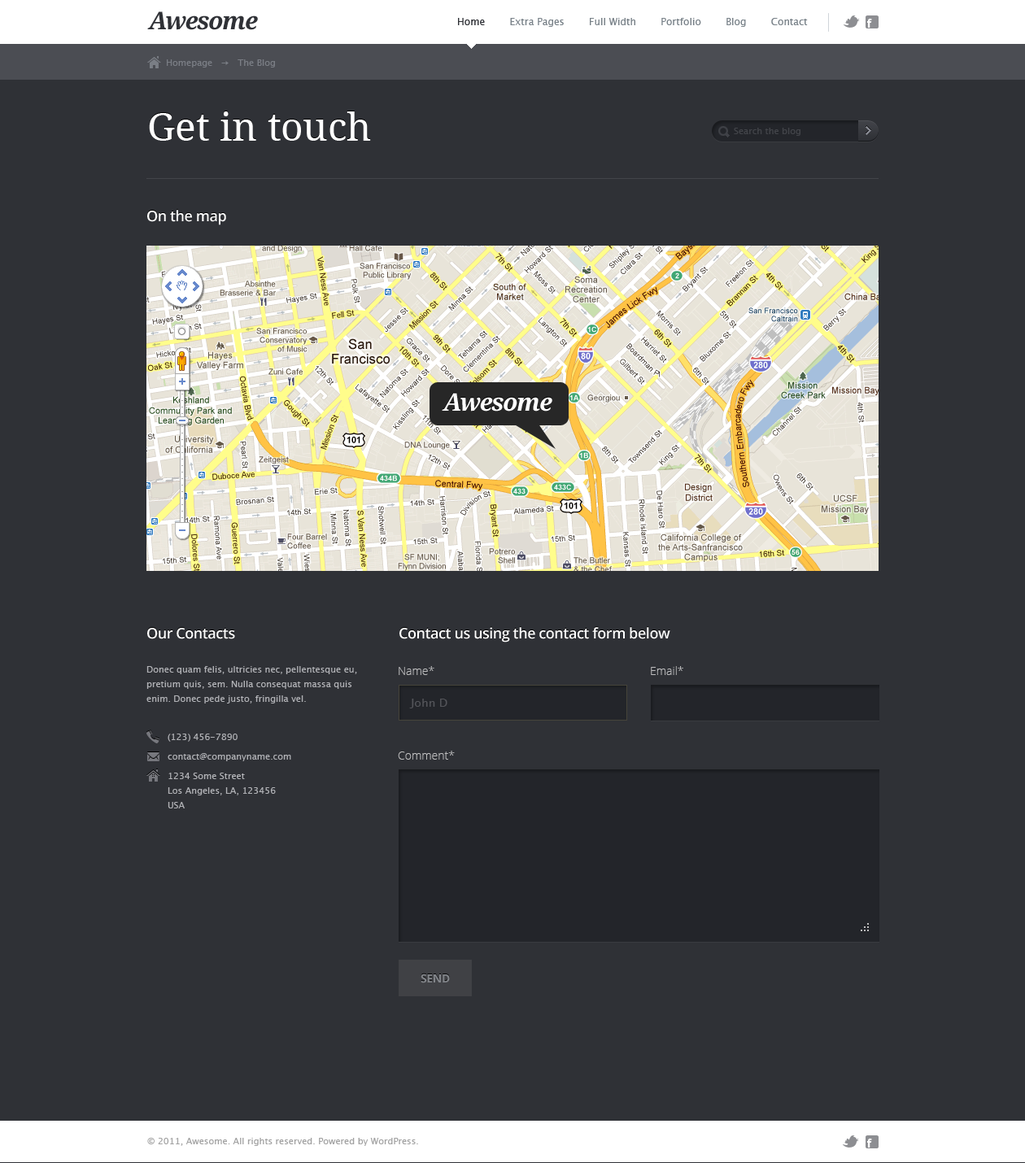
<style>
.page{position:relative;width:1025px;height:1163px;background:#2f3136}
.page>*{position:absolute;margin:0}
.t1{font:24.4px "DroidSerif-BoldItalic";letter-spacing:-0.05em;color:#2f3136}
.t2{font:9.8px "LucidaSans";color:#788188}
.t3{font:9.8px "LucidaSans";color:#2f3136}
.t4{font:8.9px "LucidaSans";color:#7a7e85}
.t5{font:39px "DroidSerif";color:#ffffff}
.t6{font:8.9px "LucidaSans";color:#424449}
.t7{font:14.6px "OpenSans-Semibold";letter-spacing:-0.025em;color:#ffffff}
.t8{font:24.4px "DroidSerif-BoldItalic";letter-spacing:-0.05em;color:#ffffff}
.t9{font:8.9px/14.6px "LucidaSans";color:#b1b2b6}
.t10{font:11.4px "OpenSans-Light";color:#bebebf}
.t11{font:11.4px "LucidaSans";color:#54555a}
.t12{font:8.9px/19.5px "LucidaSans";color:#b1b2b6}
.t13{font:11.4px "OpenSans-Bold";letter-spacing:-0.025em;color:#82858a}
.t14{font:8.9px "LucidaSans";color:#a2a2a2}
</style>
<div class="page">
<p class="t1" style="left:147px;top:11px;width:111px;height:19px">Awesome</p>
<p class="t2" style="left:458px;top:18px;width:350px;height:9px"><span class="t3">Home        </span>Extra Pages        Full Width        Portfolio        Blog        Contact</p>
<p class="t4" style="left:167px;top:59px;width:108px;height:9px">Homepage   →   The Blog</p>
<p class="t5" style="left:149px;top:111px;width:222px;height:30px">Get in touch</p>
<p class="t6" style="left:734px;top:128px;width:66px;height:8px">Search the blog</p>
<p class="t7" style="left:147px;top:210px;width:79px;height:15px">On the map</p>
<p class="t8" style="left:442px;top:393px;width:110px;height:19px">Awesome</p>
<p class="t7" style="left:147px;top:628px;width:88px;height:11px">Our Contacts</p>
<p class="t7" style="left:399px;top:627px;width:271px;height:16px">Contact us using the contact form below</p>
<p class="t9" style="left:146px;top:666px;width:211px;height:38px">Donec quam felis, ultricies nec, pellentesque eu, pretium quis, sem. Nulla consequat massa quis enim. Donec pede justo, fringilla vel.</p>
<p class="t10" style="left:399px;top:666px;width:35px;height:9px">Name*</p>
<p class="t10" style="left:651px;top:666px;width:32px;height:9px">Email*</p>
<p class="t11" style="left:409px;top:699px;width:38px;height:10px">John D</p>
<p class="t12" style="left:168px;top:734px;width:123px;height:75px">(123) 456-7890<br>contact@companyname.com<br>1234 Some <span class="t9">Street<br>Los Angeles, LA, 123456<br>USA</span></p>
<p class="t10" style="left:398px;top:751px;width:57px;height:9px">Comment*</p>
<p class="t13" style="left:421px;top:974px;width:29px;height:10px">SEND</p>
<p class="t14" style="left:147px;top:1138px;width:271px;height:8px">© 2011, Awesome. All rights reserved. Powered by WordPress.</p>
</div>
